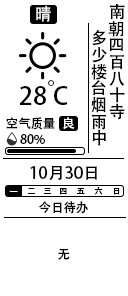
<style>
.page{position:relative;width:128px;height:296px;background:#ffffff}
.page>*{position:absolute;margin:0}
.t1{font:16.7px "AdobeHeitiStd-Regular";color:#ffffff}
.t2{font:16.7px/16.7px "AdobeHeitiStd-Regular";color:#000000}
.t3{font:25px "AdobeHeitiStd-Regular";color:#000000}
.t4{font:25px "AdobeHeitiStd-Regular"}
.t5{font:12.5px "AdobeHeitiStd-Regular";color:#000000}
.t6{font:12.5px "AdobeHeitiStd-Regular";color:#ffffff}
.t7{font:16.7px "AdobeHeitiStd-Regular";color:#000000}
.t8{font:8.3px "AdobeHeitiStd-Regular";color:#ffffff}
.t9{font:8.3px "AdobeHeitiStd-Regular";color:#000000}
</style>
<div class="page">
<p class="t1" style="left:36px;top:5px;width:15px;height:17px">晴</p>
<p class="t2" style="left:108px;top:4px;width:17px;height:116px">南<br>朝<br>四<br>百<br>八<br>十<br>寺</p>
<p class="t2" style="left:91px;top:30px;width:16px;height:116px">多<br>少<br>楼<br>台<br>烟<br>雨<br>中</p>
<p class="t3" style="left:20px;top:86px;width:26px;height:19px">28</p>
<p class="t4" style="left:48px;top:80px;width:6px;height:6px">°</p>
<p class="t3" style="left:54px;top:86px;width:14px;height:19px">C</p>
<p class="t5" style="left:6px;top:117px;width:49px;height:13px">空气质量</p>
<p class="t6" style="left:63px;top:117px;width:12px;height:12px">良</p>
<p class="t5" style="left:20px;top:134px;width:25px;height:11px">80%</p>
<p class="t7" style="left:30px;top:166px;width:67px;height:14px">10月30日</p>
<p class="t8" style="left:9px;top:190px;width:9px;height:3px">一</p>
<p class="t9" style="left:27px;top:188px;width:9px;height:6px">二</p>
<p class="t9" style="left:43px;top:188px;width:9px;height:6px">三</p>
<p class="t9" style="left:60px;top:188px;width:7px;height:7px">四</p>
<p class="t9" style="left:77px;top:187px;width:8px;height:7px">五</p>
<p class="t9" style="left:94px;top:187px;width:9px;height:8px">六</p>
<p class="t9" style="left:114px;top:188px;width:6px;height:7px">日</p>
<p class="t5" style="left:39px;top:201px;width:49px;height:13px">今日待办</p>
<p class="t5" style="left:58px;top:248px;width:12px;height:12px">无</p>
</div>
